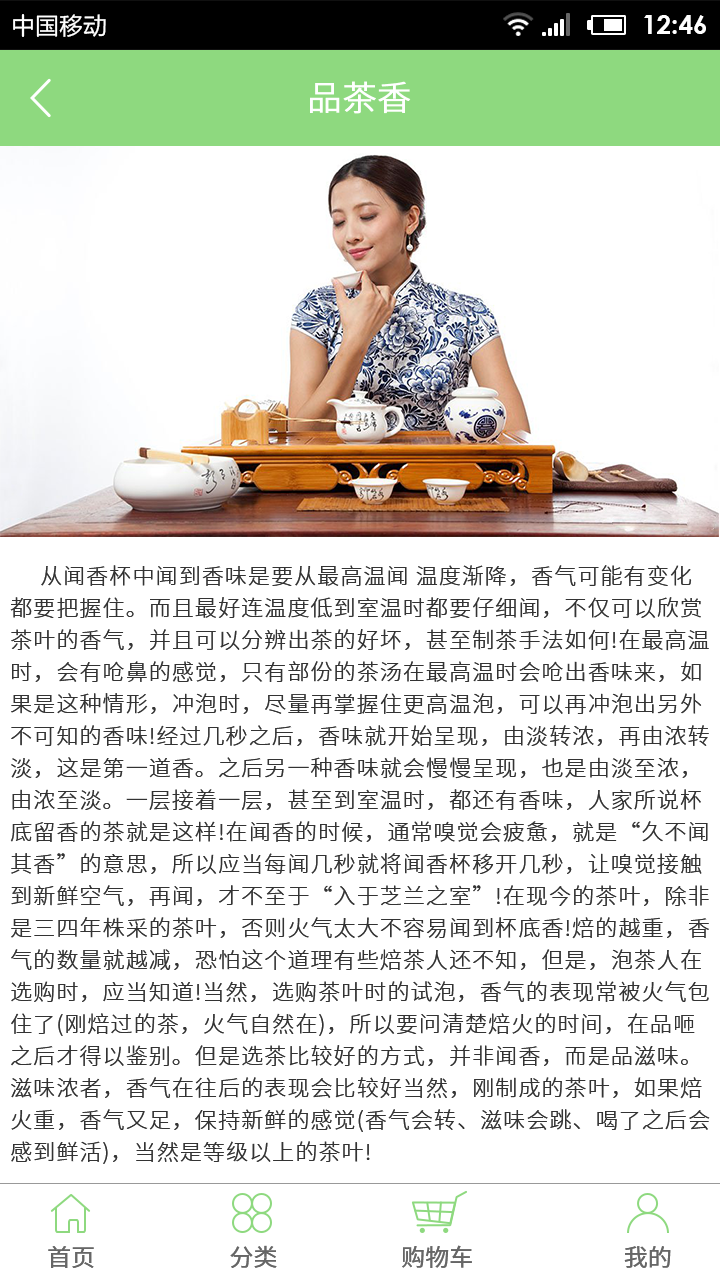
<style>
.page{position:relative;width:720px;height:1280px;background:#ffffff}
.page>*{position:absolute;margin:0}
.t1{font:34px "NotoSansHans-Light";color:#ffffff;font-weight:bold}
.t2{font:22px/32px "NotoSansHans-Light";letter-spacing:0.05em;color:#333333}
.t3{font:24px "NotoSansHans-Regular";color:#666666;text-transform:uppercase}
</style>
<div class="page">
<p class="t1" style="left:310px;top:81px;width:101px;height:33px">品茶香</p>
<p class="t2" style="left:10px;top:565px;width:700px;height:599px">从闻香杯中闻到香味是要从最高温闻 温度渐降，香气可能有变化都要把握住。而且最好连温度低到室温时都要仔细闻，不仅可以欣赏茶叶的香气，并且可以分辨出茶的好坏，甚至制茶手法如何!在最高温时，会有呛鼻的感觉，只有部份的茶汤在最高温时会呛出香味来，如果是这种情形，冲泡时，尽量再掌握住更高温泡，可以再冲泡出另外不可知的香味!经过几秒之后，香味就开始呈现，由淡转浓，再由浓转淡，这是第一道香。之后另一种香味就会慢慢呈现，也是由淡至浓，由浓至淡。一层接着一层，甚至到室温时，都还有香味，人家所说杯底留香的茶就是这样!在闻香的时候，通常嗅觉会疲惫，就是“久不闻其香”的意思，所以应当每闻几秒就将闻香杯移开几秒，让嗅觉接触到新鲜空气，再闻，才不至于“入于芝兰之室”!在现今的茶叶，除非是三四年株采的茶叶，否则火气太大不容易闻到杯底香!焙的越重，香气的数量就越减，恐怕这个道理有些焙茶人还不知，但是，泡茶人在选购时，应当知道!当然，选购茶叶时的试泡，香气的表现常被火气包住了(刚焙过的茶，火气自然在)，所以要问清楚焙火的时间，在品咂之后才得以鉴别。但是选茶比较好的方式，并非闻香，而是品滋味。滋味浓者，香气在往后的表现会比较好当然，刚制成的茶叶，如果焙火重，香气又足，保持新鲜的感觉(香气会转、滋味会跳、喝了之后会感到鲜活)，当然是等级以上的茶叶!</p>
<p class="t3" style="left:48px;top:1245px;width:623px;height:23px">首页                         分类                       购物车                            我的</p>
</div>
